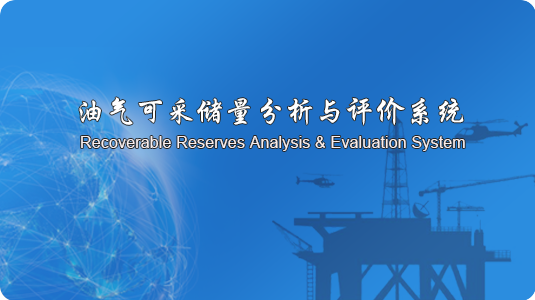
<style>
.page{position:relative;width:535px;height:300px}
.page>*{position:absolute;margin:0}
.t1{font:30px "CTXingKaiSJ";color:#ffffff}
.t2{font:16px "ArialMT";letter-spacing:0.01em;color:#f8eeee}
</style>
<div class="page">
<p class="t1" style="left:79px;top:97px;width:385px;height:29px">油气可采储量分析与评价系统</p>
<p class="t2" style="left:81px;top:136px;width:384px;height:15px">Recoverable Reserves Analysis &amp; Evaluation System</p>
</div>
